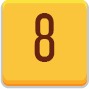
<style>
.page{position:relative;width:89px;height:89px;background:#fbc53b}
.page>*{position:absolute;margin:0}
.t1{font:60px "LibelSuitRg-Regular";color:#662312}
</style>
<div class="page">
<p class="t1" style="left:34px;top:13px;width:21px;height:49px">8</p>
</div>
